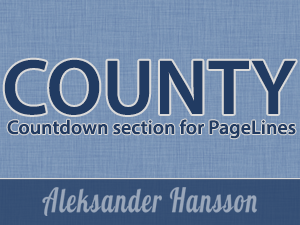
<style>
.page{position:relative;width:300px;height:225px}
.page>*{position:absolute;margin:0}
.t1{font:79px "MyriadPro-Semibold";color:#213b62}
.t2{font:20px "MyriadPro-Semibold";color:#213b62}
</style>
<div class="page">
<p class="t1" style="left:4px;top:59px;width:292px;height:56px">COUNTY</p>
<p class="t2" style="left:7px;top:119px;width:289px;height:20px">Countdown section for PageLines</p>
</div>
